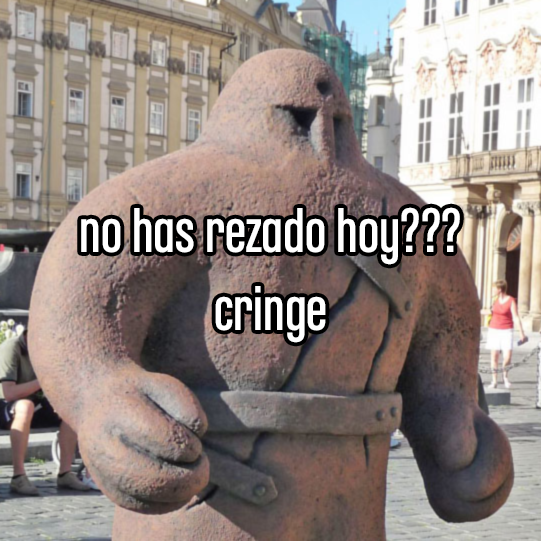
<style>
.page{position:relative;width:541px;height:541px}
.page>*{position:absolute;margin:0}
.t1{font:63.7px "ChaletComprime-CologneEighty";color:#ffffff}
</style>
<div class="page">
<p class="t1" style="left:81px;top:207px;width:379px;height:136px;text-align:center">no has rezado hoy???<br>cringe</p>
</div>
